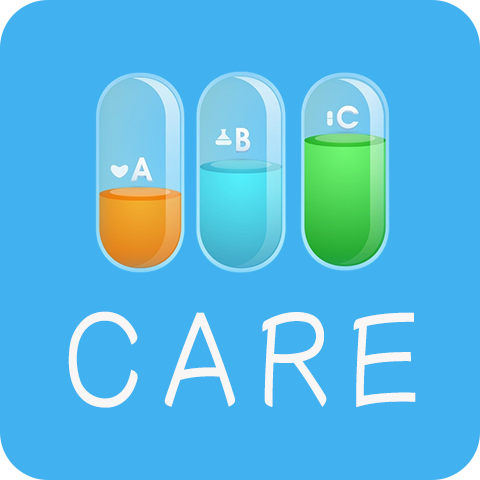
<style>
.page{position:relative;width:480px;height:480px;background:#41b1f0}
.page>*{position:absolute;margin:0}
.t1{font:129.6px "YuppySC-Regular";letter-spacing:0.2em;color:#f8f7f6;scale:0.83 1}
</style>
<div class="page">
<p class="t1" style="left:68px;top:311px;width:348px;height:97px">CARE</p>
</div>
